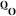
<style>
.page{position:relative;width:16px;height:16px;background:#ffffff}
.page>*{position:absolute;margin:0}
.t1{font:10px "PlayfairDisplaySC-Bold";letter-spacing:-0.02em;color:#000000}
</style>
<div class="page">
<p class="t1" style="left:0px;top:0px;width:8px;height:10px">Q</p>
<p class="t1" style="left:8px;top:7px;width:8px;height:9px">O</p>
</div>
